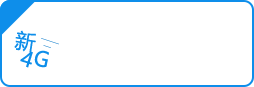
<style>
.page{position:relative;width:254px;height:87px;background:#ffffff}
.page>*{position:absolute;margin:0}
.t1{font:20.8px "MicrosoftYaHei";color:#0e8eea}
.t2{font:20.7px "MicrosoftYaHei";color:#0e8eea}
</style>
<div class="page">
<p class="t1" style="left:14px;top:30px;width:22px;height:23px;rotate:9deg">新</p>
<p class="t2" style="left:20px;top:51px;width:13px;height:17px;rotate:18deg">4</p>
<p class="t2" style="left:34px;top:50px;width:15px;height:18px;rotate:12deg">G</p>
</div>
